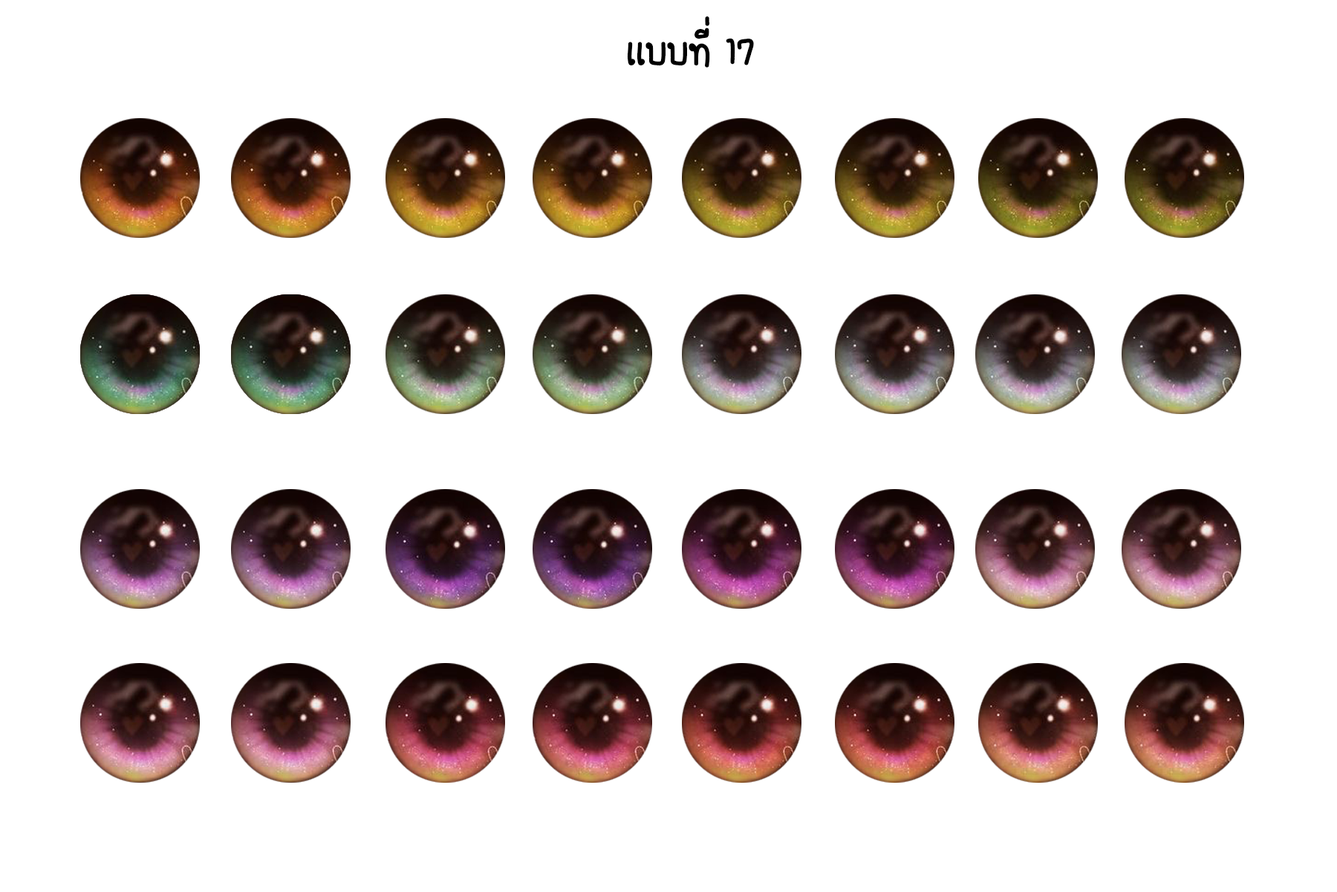
<style>
.page{position:relative;width:1337px;height:892px;background:#ffffff}
.page>*{position:absolute;margin:0}
.t1{font:55.7px "FCDaisyRegular";color:#000000}
</style>
<div class="page">
<p class="t1" style="left:627px;top:16px;width:127px;height:52px">เเบบที่ 17</p>
</div>
